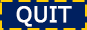
<style>
.page{position:relative;width:87px;height:30px;background:#002060}
.page>*{position:absolute;margin:0}
.t1{font:21px "Verdana";color:#ffffff;font-weight:bold}
</style>
<div class="page">
<p class="t1" style="left:16px;top:6px;width:56px;height:21px">QUIT</p>
</div>
